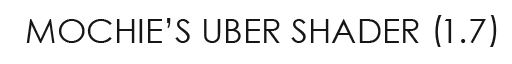
<style>
.page{position:relative;width:512px;height:64px;background:#ffffff}
.page>*{position:absolute;margin:0}
.t1{font:34px "CenturyGothic";color:#161616}
</style>
<div class="page">
<p class="t1" style="left:26px;top:18px;width:460px;height:25px">MOCHIE’S UBER SHADER  1.7</p>
</div>
